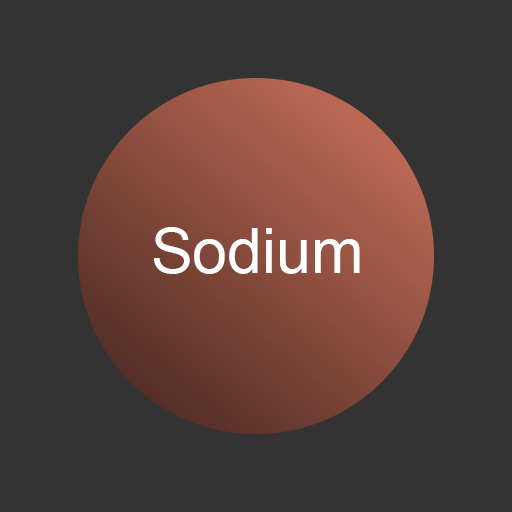
<style>
.page{position:relative;width:512px;height:512px;background:#333333}
.page>*{position:absolute;margin:0}
.t1{font:62.5px "ArialMT";color:#ffffff}
</style>
<div class="page">
<p class="t1" style="left:153px;top:227px;width:207px;height:47px">Sodium</p>
</div>
